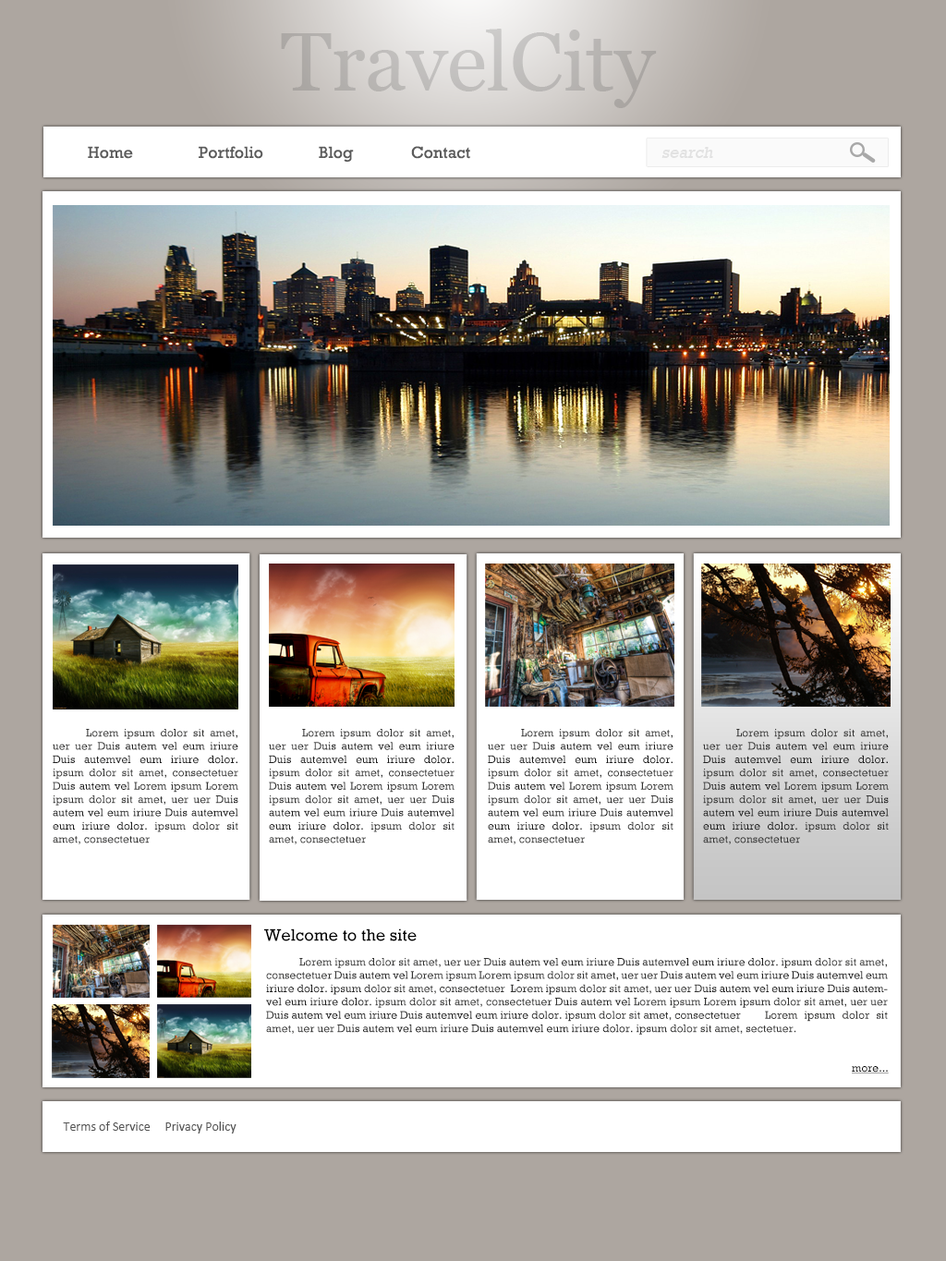
<style>
.page{position:relative;width:946px;height:1261px;background:#ada6a0}
.page>*{position:absolute;margin:0}
.t1{font:81.8px "Vani";color:#bab8b5}
.t2{font:16.6px "Rockwell";color:#5b5b5b}
.t3{font:16.6px "Rockwell";color:#e2e2e2;font-style:italic}
.t4{font:11.1px "Rockwell";color:#1f1f1f}
.t5{font:11.1px "Rockwell";color:#343433}
.t6{font:16.8px "Rockwell";color:#000000}
.t7{font:11.1px "Rockwell";color:#000000;text-decoration:underline}
.t8{font:12.9px "Calibri";color:#545454}
</style>
<div class="page">
<p class="t1" style="left:281px;top:29px;width:376px;height:79px">TravelCity</p>
<p class="t2" style="left:88px;top:146px;width:45px;height:13px">Home</p>
<p class="t2" style="left:199px;top:146px;width:64px;height:13px">Portfolio</p>
<p class="t2" style="left:319px;top:146px;width:35px;height:17px">Blog</p>
<p class="t2" style="left:411px;top:146px;width:59px;height:13px">Contact</p>
<p class="t3" style="left:661px;top:147px;width:52px;height:11px">search</p>
<p class="t4" style="left:53px;top:729px;width:185px;height:115px;text-align:justify"><span class="t5"> Lorem ipsum dolor sit amet, uer uer D</span>uis autem vel eum iriure Duis autemvel eum iriure dolor. <span class="t5">ipsum dolor sit amet, consectetuer D</span>uis autem vel <span class="t5">Lorem ipsum Lorem ipsum dolor sit amet, uer uer D</span>uis autem vel eum iriure Duis autemvel eum iriure dolor. <span class="t5">ipsum dolor sit amet, consectetuer</span></p>
<p class="t4" style="left:269px;top:729px;width:185px;height:115px;text-align:justify"><span class="t5"> Lorem ipsum dolor sit amet, uer uer D</span>uis autem vel eum iriure Duis autemvel eum iriure dolor. <span class="t5">ipsum dolor sit amet, consectetuer D</span>uis autem vel <span class="t5">Lorem ipsum Lorem ipsum dolor sit amet, uer uer D</span>uis autem vel eum iriure Duis autemvel eum iriure dolor. <span class="t5">ipsum dolor sit amet, consectetuer</span></p>
<p class="t4" style="left:488px;top:729px;width:185px;height:115px;text-align:justify"><span class="t5"> Lorem ipsum dolor sit amet, uer uer D</span>uis autem vel eum iriure Duis autemvel eum iriure dolor. <span class="t5">ipsum dolor sit amet, consectetuer D</span>uis autem vel <span class="t5">Lorem ipsum Lorem ipsum dolor sit amet, uer uer D</span>uis autem vel eum iriure Duis autemvel eum iriure dolor. <span class="t5">ipsum dolor sit amet, consectetuer</span></p>
<p class="t4" style="left:703px;top:729px;width:186px;height:115px;text-align:justify"><span class="t5"> Lorem ipsum dolor sit amet, uer uer D</span>uis autem vel eum iriure Duis autemvel eum iriure dolor. <span class="t5">ipsum dolor sit amet, consectetuer D</span>uis autem vel <span class="t5">Lorem ipsum Lorem ipsum dolor sit amet, uer uer D</span>uis autem vel eum iriure Duis autemvel eum iriure dolor. <span class="t5">ipsum dolor sit amet, consectetuer</span></p>
<p class="t6" style="left:264px;top:928px;width:153px;height:13px">Welcome to the site</p>
<p class="t5" style="left:266px;top:958px;width:622px;height:76px;text-align:justify">Lorem ipsum dolor sit amet, uer uer D<span class="t4">uis autem vel eum iriure Duis autemvel eum iriure dolor. </span>ipsum dolor sit amet, consectetuer D<span class="t4">uis autem vel </span>Lorem ipsum Lorem ipsum dolor sit amet, uer uer D<span class="t4">uis autem vel eum iriure Duis autemvel eum iriure dolor. </span>ipsum dolor sit amet, consectetuer  Lorem ipsum dolor sit amet, uer uer D<span class="t4">uis autem vel eum iriure Duis autemvel eum iriure dolor. </span>ipsum dolor sit amet, consectetuer D<span class="t4">uis autem vel </span>Lorem ipsum Lorem ipsum dolor sit amet, uer uer D<span class="t4">uis autem vel eum iriure Duis autemvel eum iriure dolor. </span>ipsum dolor sit amet, consectetuer  Lorem ipsum dolor sit amet, uer uer D<span class="t4">uis autem vel eum iriure Duis autemvel eum iriure dolor. </span>ipsum dolor sit amet, sectetuer.</p>
<p class="t7" style="left:852px;top:1066px;width:37px;height:7px">more...</p>
<p class="t8" style="left:63px;top:1121px;width:173px;height:12px">Terms of Service     Privacy Policy</p>
</div>
